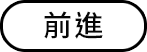
<style>
.page{position:relative;width:147px;height:52px;background:#ffffff}
.page>*{position:absolute;margin:0}
.t1{font:29.2px "NotoSansCJKtc-Medium";letter-spacing:0.06em;color:#060606}
</style>
<div class="page">
<p class="t1" style="left:44px;top:11px;width:59px;height:28px">前進</p>
</div>
